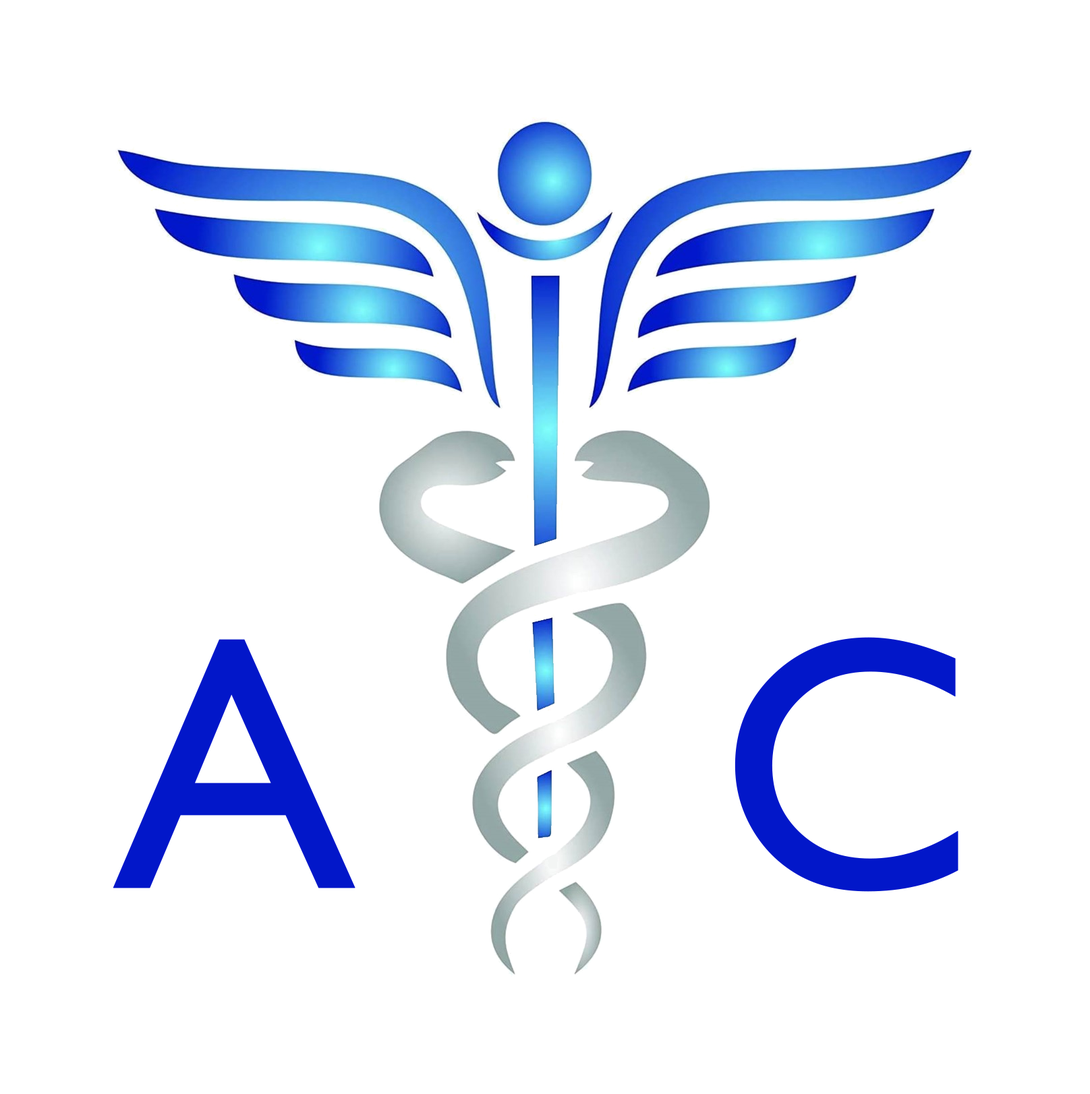
<style>
.page{position:relative;width:1090px;height:1094px;background:#ffffff}
.page>*{position:absolute;margin:0}
.t1{font:361.9px "GillSansMT";color:#0217c9;font-weight:bold}
</style>
<div class="page">
<p class="t1" style="left:113px;top:639px;width:242px;height:250px">A</p>
<p class="t1" style="left:734px;top:637px;width:224px;height:255px">C</p>
</div>
